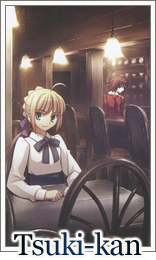
<style>
.page{position:relative;width:156px;height:260px}
.page>*{position:absolute;margin:0}
.t1{font:30px "Georgia";letter-spacing:-0.025em}
</style>
<div class="page">
<p class="t1" style="left:14px;top:232px;width:128px;height:24px">Tsuki-kan</p>
</div>
